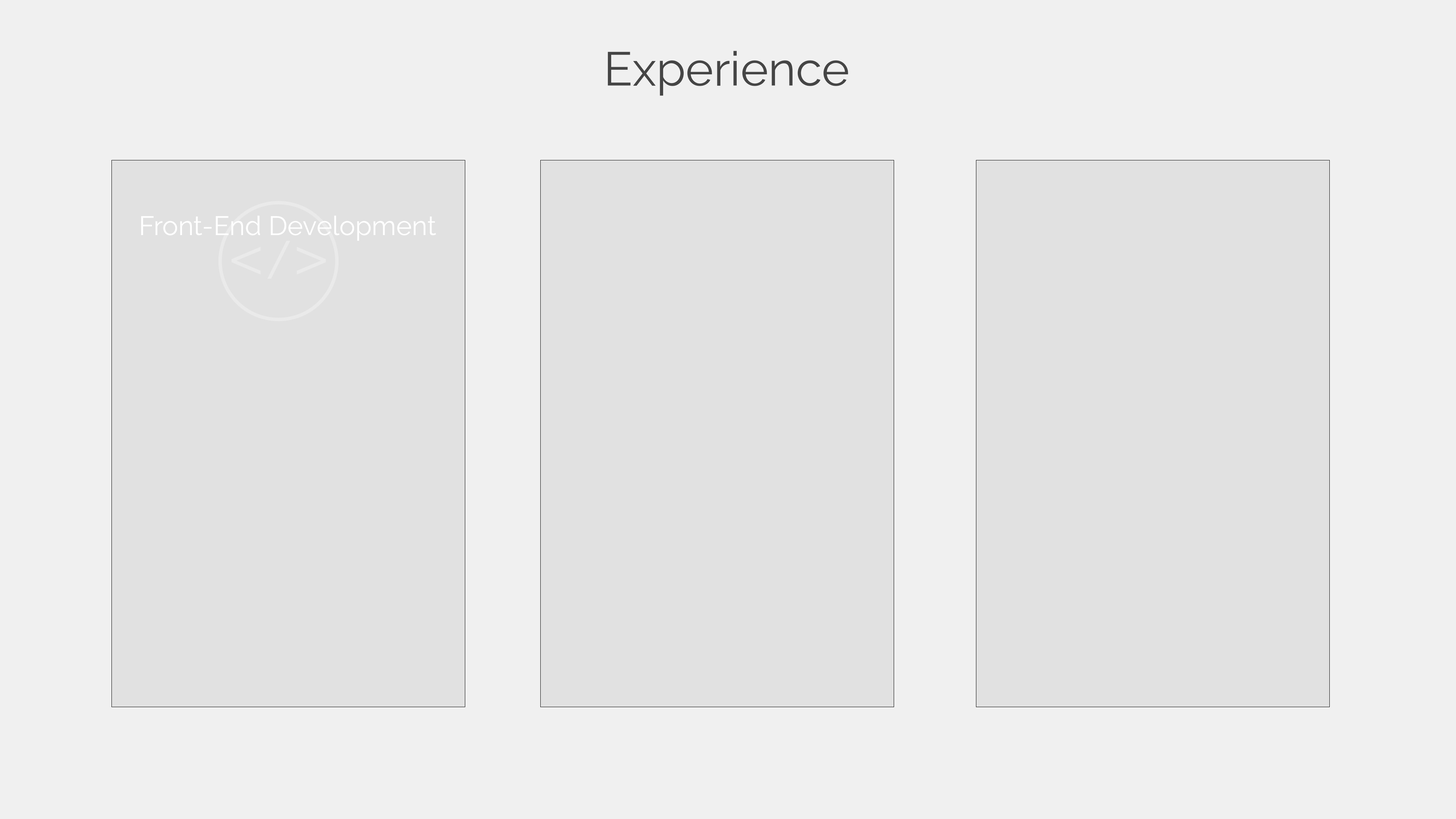
<style>
.page{position:relative;width:1456px;height:819px;background:#f0f0f0}
.page>*{position:absolute;margin:0}
.t1{font:47.4px "Raleway-Regular";color:#454545}
.t2{font:26.6px "Raleway-Regular";color:#ffffff}
.t3{font:54.6px "CalistoMT";color:#ffffff}
</style>
<div class="page">
<p class="t1" style="left:608px;top:51px;width:240px;height:45px">Experience</p>
<p class="t2" style="left:141px;top:215px;width:295px;height:26px">Front-End Development</p>
<p class="t3" style="left:231px;top:241px;width:95px;height:38px;opacity:0.3">&lt;/&gt;</p>
</div>
